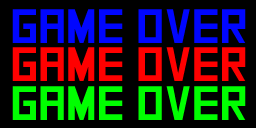
<style>
.page{position:relative;width:256px;height:128px;background:#000000}
.page>*{position:absolute;margin:0}
.t1{font:48px "SquareFont";color:#0006ff;text-transform:uppercase}
.t2{font:48px "SquareFont";color:#ff0000;text-transform:uppercase}
.t3{font:48px "SquareFont";color:#00ff00;text-transform:uppercase}
</style>
<div class="page">
<p class="t1" style="left:12px;top:9px;width:234px;height:34px">GAME OVER</p>
<p class="t2" style="left:12px;top:47px;width:234px;height:34px">GAME OVER</p>
<p class="t3" style="left:12px;top:86px;width:234px;height:34px">GAME OVER</p>
</div>
